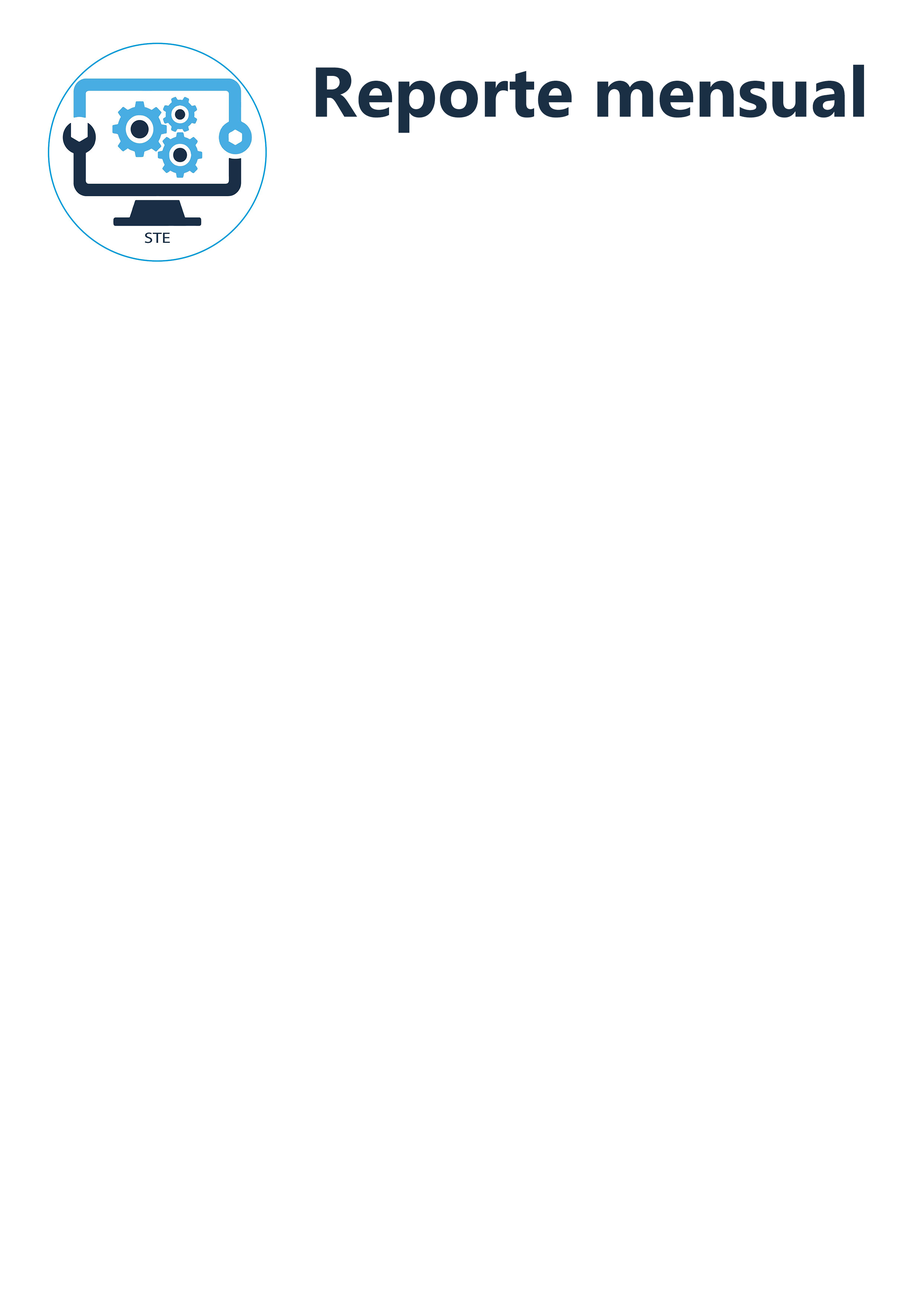
<style>
.page{position:relative;width:918px;height:1299px;background:#ffffff}
.page>*{position:absolute;margin:0}
.t1{font:70.2px "Ebrima-Bold";color:#1a2f44}
</style>
<div class="page">
<p class="t1" style="left:316px;top:64px;width:548px;height:69px">Reporte mensual</p>
</div>
